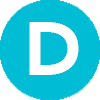
<style>
.page{position:relative;width:100px;height:100px;background:#00bcd4}
.page>*{position:absolute;margin:0}
.t1{font:72px "KumbhSans-Bold";letter-spacing:0.2em;color:#ffffff}
</style>
<div class="page">
<p class="t1" style="left:29px;top:22px;width:50px;height:53px">D</p>
</div>
